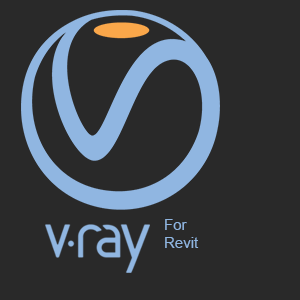
<style>
.page{position:relative;width:300px;height:300px;background:#292929}
.page>*{position:absolute;margin:0}
.t1{font:15px "ArialMT";color:#90b6e1}
</style>
<div class="page">
<p class="t1" style="left:165px;top:219px;width:34px;height:29px">For<br>Revit</p>
</div>
